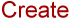
<style>
.page{position:relative;width:69px;height:24px;background:#ffffff}
.page>*{position:absolute;margin:0}
.t1{font:22.7px "ArialMT";color:#a10000}
</style>
<div class="page">
<p class="t1" style="left:2px;top:1px;width:67px;height:17px">Create</p>
</div>
